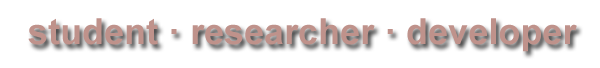
<style>
.page{position:relative;width:600px;height:68px;background:#ffffff}
.page>*{position:absolute;margin:0}
.t1{font:36px "Arial-BoldMT";color:#bd857c}
</style>
<div class="page">
<p class="t1" style="left:28px;top:18px;width:549px;height:34px">student · researcher · developer</p>
</div>
